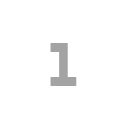
<style>
.page{position:relative;width:128px;height:128px;background:#ffffff}
.page>*{position:absolute;margin:0}
.t1{font:72px "Silkscreen";color:#a3a3a3}
</style>
<div class="page">
<p class="t1" style="left:50px;top:43px;width:27px;height:43px">1</p>
</div>
